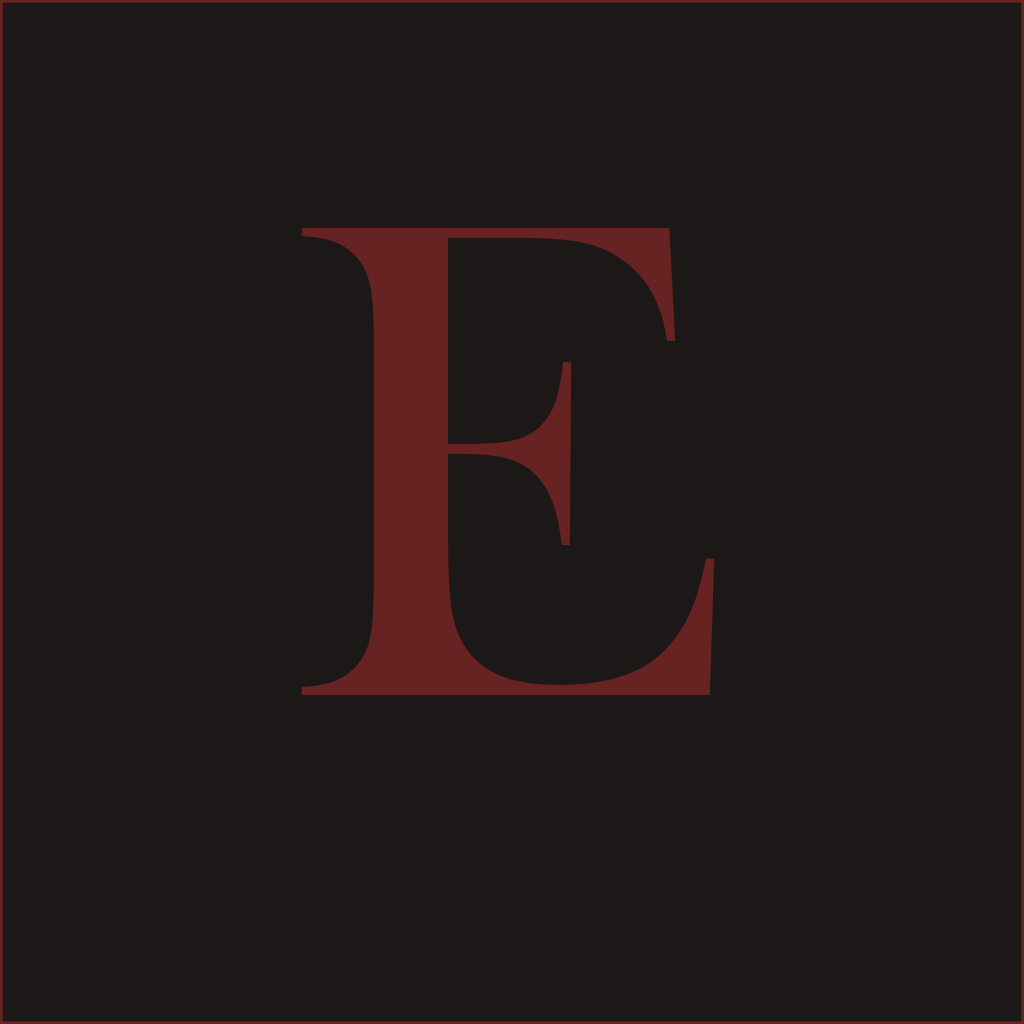
<style>
.page{position:relative;width:1024px;height:1024px;background:#1c1818}
.page>*{position:absolute;margin:0}
.t1{font:700px "BaskOldFace";color:#672222}
</style>
<div class="page">
<p class="t1" style="left:301px;top:227px;width:414px;height:468px">E</p>
</div>
